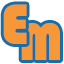
<style>
.page{position:relative;width:64px;height:64px;background:#f79838}
.page>*{position:absolute;margin:0}
.t1{font:59px "Bauhaus93";letter-spacing:0.05em;color:#f79838}
.t2{font:54px "Bauhaus93";letter-spacing:0.05em;color:#f79838}
</style>
<div class="page">
<p class="t1" style="left:3px;top:4px;width:24px;height:40px">E</p>
<p class="t2" style="left:21px;top:23px;width:39px;height:37px">M</p>
</div>
